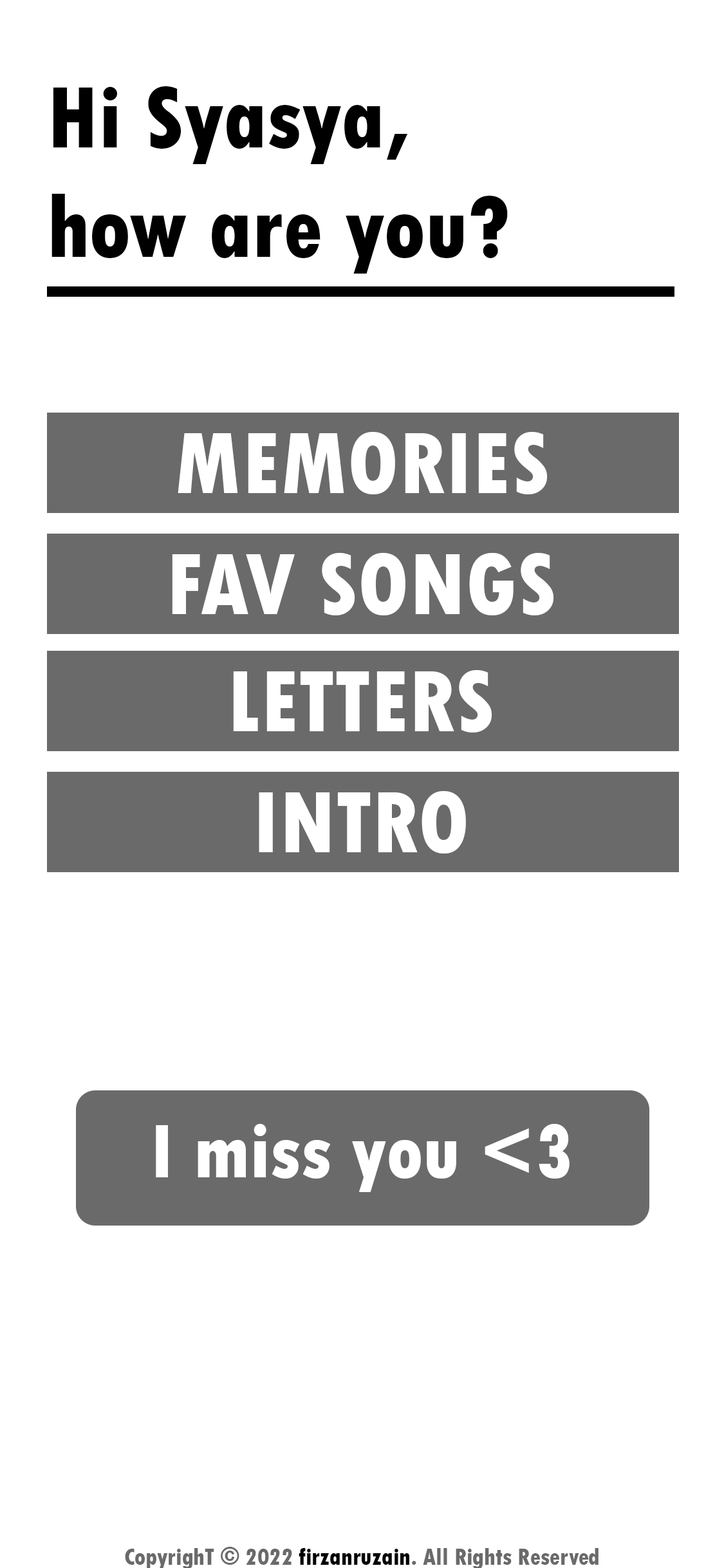
<style>
.page{position:relative;width:724px;height:1568px;background:#ffffff}
.page>*{position:absolute;margin:0}
.t1{font:91.2px "TwCenMT-CondensedExtraBold";color:#000000}
.t2{font:91.2px "TwCenMT-CondensedExtraBold";color:#ffffff;text-transform:uppercase}
.t3{font:80.5px "TwCenMT-CondensedExtraBold";color:#ffffff}
.t4{font:24.1px "TwCenMT-CondensedExtraBold";color:#6a6a6a}
.t5{font:24.1px "TwCenMT-CondensedExtraBold";color:#000000}
</style>
<div class="page">
<p class="t1" style="left:51px;top:86px;width:457px;height:188px">Hi Syasya,<br>how are you?</p>
<p class="t2" style="left:178px;top:432px;width:370px;height:62px">Memories</p>
<p class="t2" style="left:172px;top:553px;width:382px;height:62px">Fav songs</p>
<p class="t2" style="left:233px;top:670px;width:259px;height:63px">letters</p>
<p class="t2" style="left:259px;top:791px;width:207px;height:63px">intro</p>
<p class="t3" style="left:156px;top:1124px;width:414px;height:68px">I miss you &lt;3</p>
<p class="t4" style="left:125px;top:1547px;width:474px;height:22px">CopyrighT © 2022 <span class="t5">firzanruzain</span>. All Rights Reserved</p>
</div>
